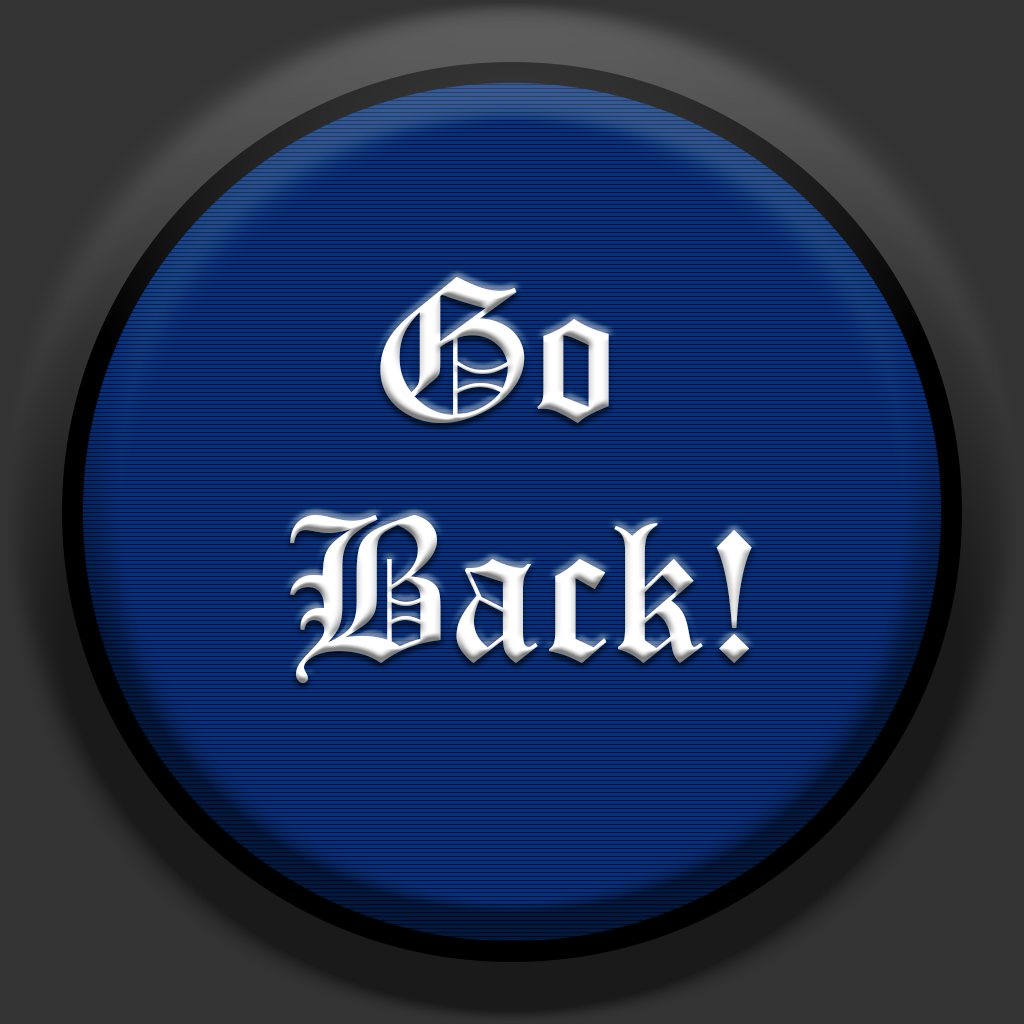
<style>
.page{position:relative;width:1024px;height:1024px;background:#00102b}
.page>*{position:absolute;margin:0}
.t1{font:200px "OldEnglishTextMT";color:#ffffff}
</style>
<div class="page">
<p class="t1" style="left:290px;top:277px;width:462px;height:406px;text-align:center">Go <br>Back!</p>
</div>
